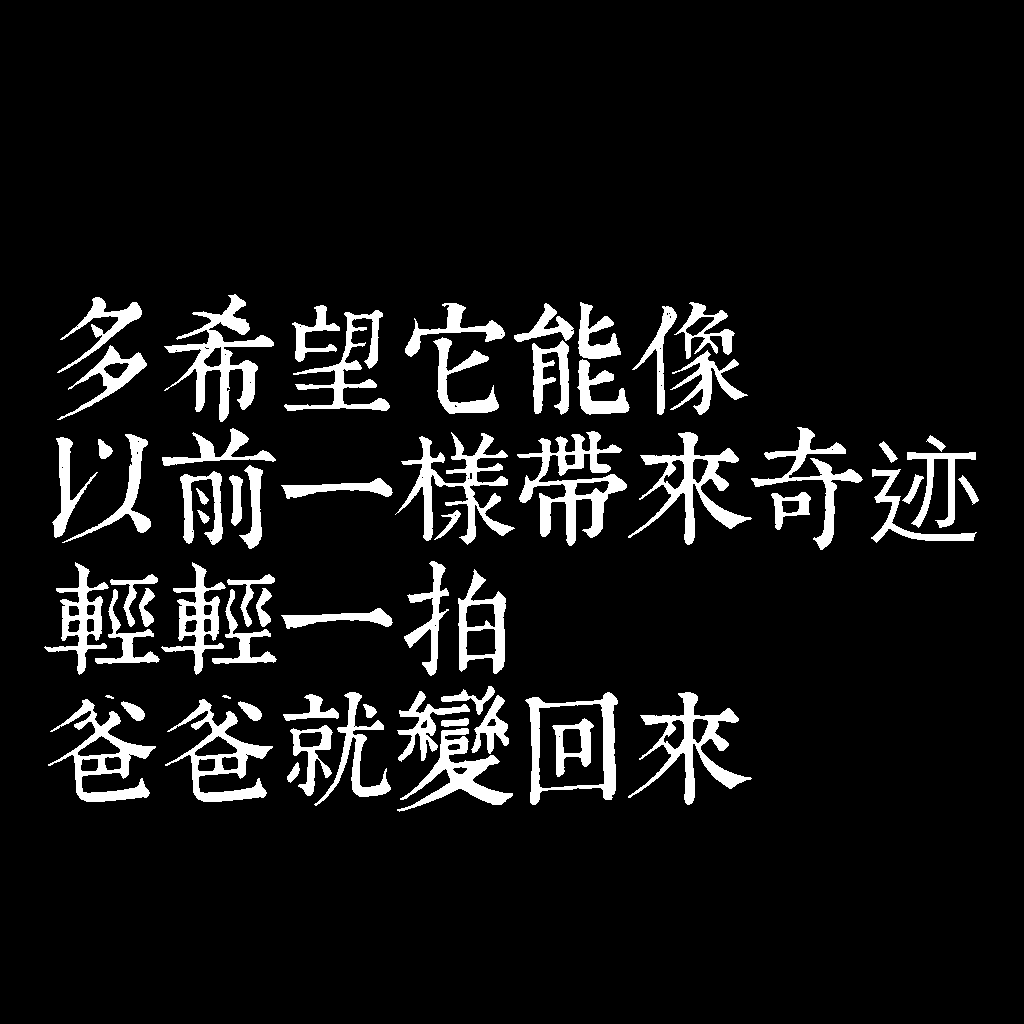
<style>
.page{position:relative;width:1024px;height:1024px;background:#000000}
.page>*{position:absolute;margin:0}
.t1{font:120px/130px "TpldKhangXiDictTrial";letter-spacing:-0.02em;color:#ffffff}
.t2{font:120px/130px "STHeitiTC-Light";letter-spacing:-0.02em;color:#ffffff}
</style>
<div class="page">
<p class="t1" style="left:44px;top:294px;width:935px;height:518px">多希望它能像<br>以前一樣帶來奇<span class="t2">迹<br></span>輕輕一拍<br>爸爸就變回來</p>
</div>
